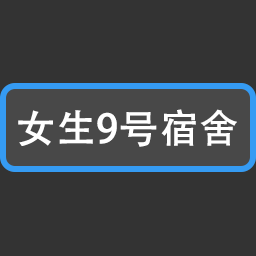
<style>
.page{position:relative;width:256px;height:256px;background:#333333}
.page>*{position:absolute;margin:0}
.t1{font:39px "AdobeHeitiStd-Regular";color:#ffffff;font-weight:bold}
</style>
<div class="page">
<p class="t1" style="left:18px;top:109px;width:219px;height:38px">女生9号宿舍</p>
</div>
